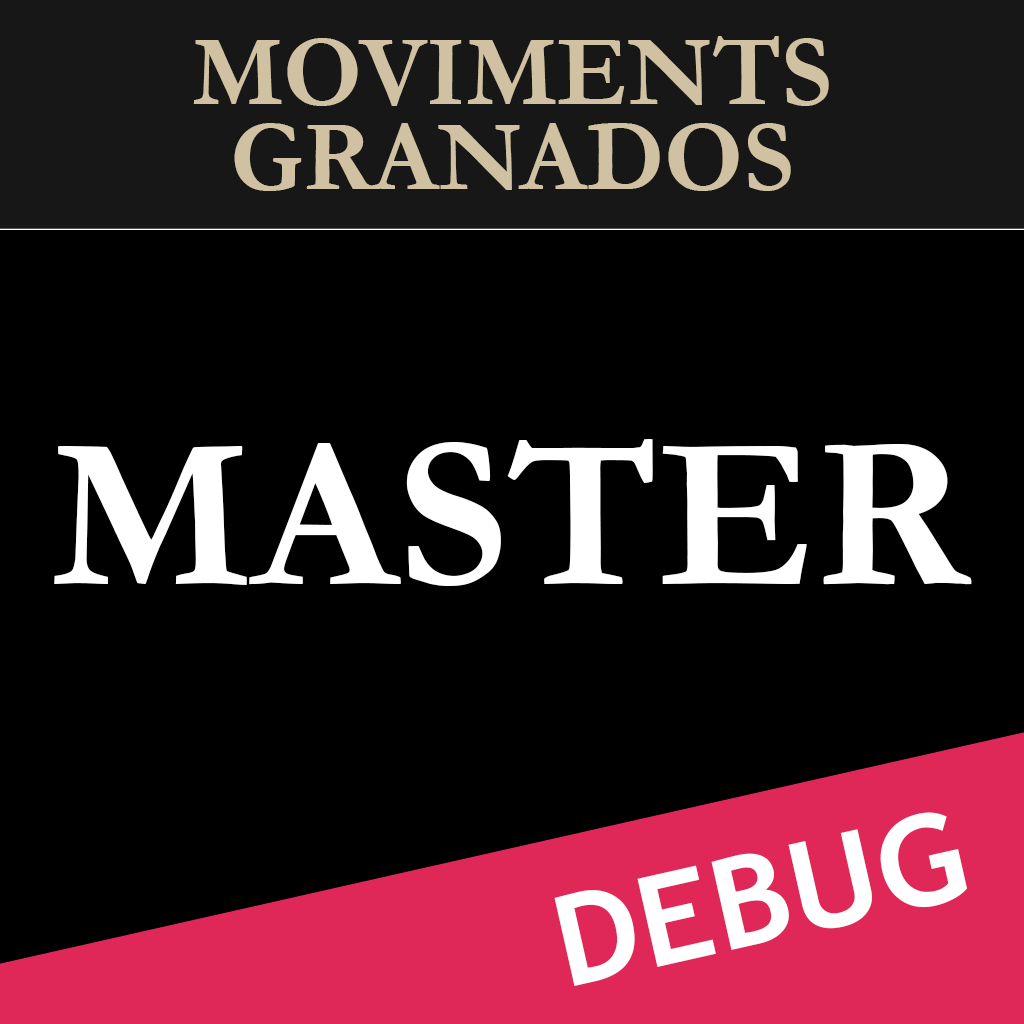
<style>
.page{position:relative;width:1024px;height:1024px;background:#000000}
.page>*{position:absolute;margin:0}
.t1{font:100px/85px "Garamond-Bold";color:#cfc1a1}
.t2{font:220px "Garamond-Bold";color:#ffffff}
.t3{font:126px "TrebuchetMS-Bold";color:#ffffff;scale:1.05 1}
</style>
<div class="page">
<p class="t1" style="left:193px;top:36px;width:636px;height:155px;text-align:center">MOVIMENTS<br>GRANADOS</p>
<p class="t2" style="left:54px;top:439px;width:918px;height:147px">MASTER</p>
<p class="t3" style="left:554px;top:812px;width:413px;height:174px;rotate:-13deg">DEBUG</p>
</div>
